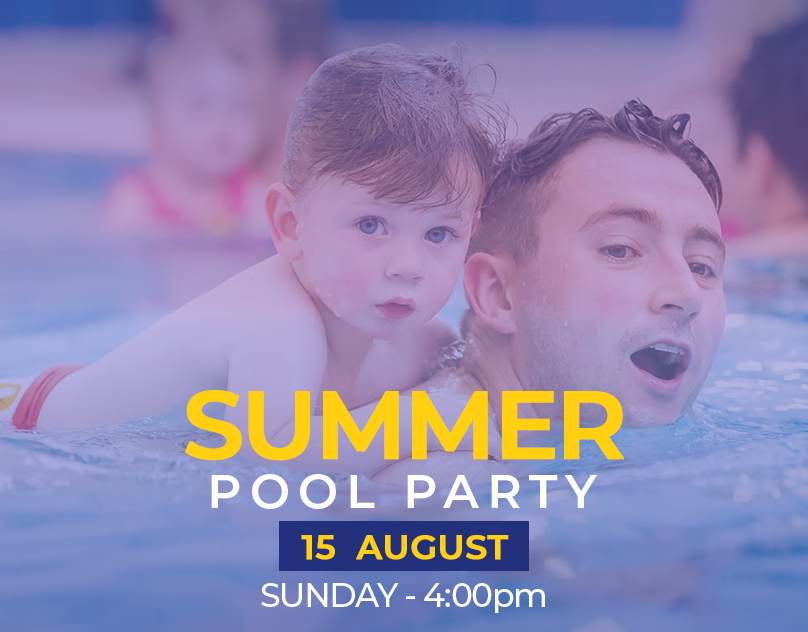
<style>
.page{position:relative;width:808px;height:632px}
.page>*{position:absolute;margin:0}
.t1{font:95.9px "Montserrat-SemiBold";letter-spacing:-0.048em;color:#ffcf11;font-weight:bold}
.t2{font:47.4px "Montserrat-SemiBold";letter-spacing:0.168em;color:#ffffff}
.t3{font:34px "Montserrat-SemiBold";color:#ffcf10;font-weight:bold}
.t4{font:33px "Montserrat-Medium";letter-spacing:-0.038em;color:#ffffff}
</style>
<div class="page">
<p class="t1" style="left:185px;top:390px;width:439px;height:71px">SUMMER</p>
<p class="t2" style="left:211px;top:474px;width:386px;height:35px">POOL PARTY</p>
<p class="t3" style="left:301px;top:535px;width:208px;height:25px">15  AUGUST</p>
<p class="t4" style="left:261px;top:583px;width:284px;height:30px">SUNDAY - 4:00pm</p>
</div>
